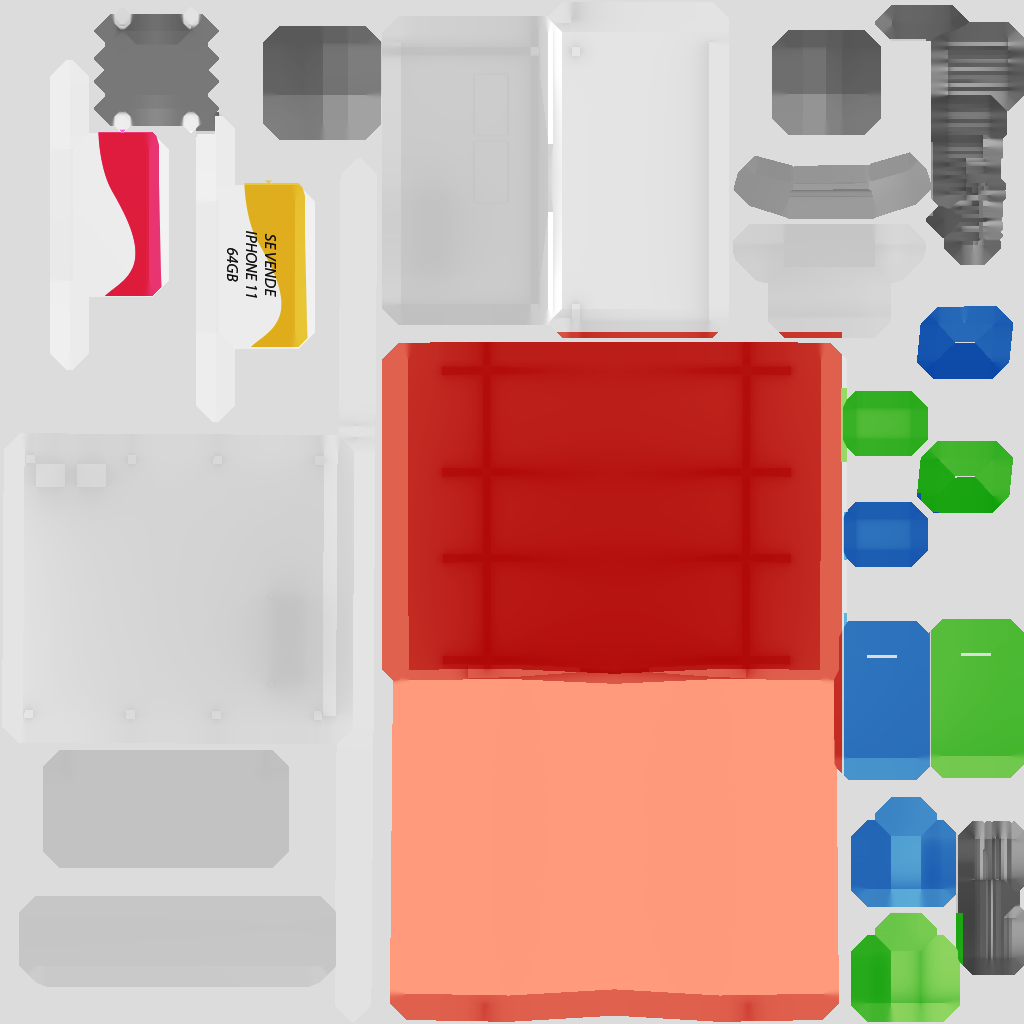
<style>
.page{position:relative;width:1024px;height:1024px;background:#dcdcdc}
.page>*{position:absolute;margin:0}
.t1{font:15.9px "MyriadPro-It";color:#202020}
</style>
<div class="page">
<p class="t1" style="left:227px;top:231px;width:49px;height:67px;text-align:center;rotate:90deg">SE VENDE <br>IPHONE 11<br>64GB</p>
</div>
